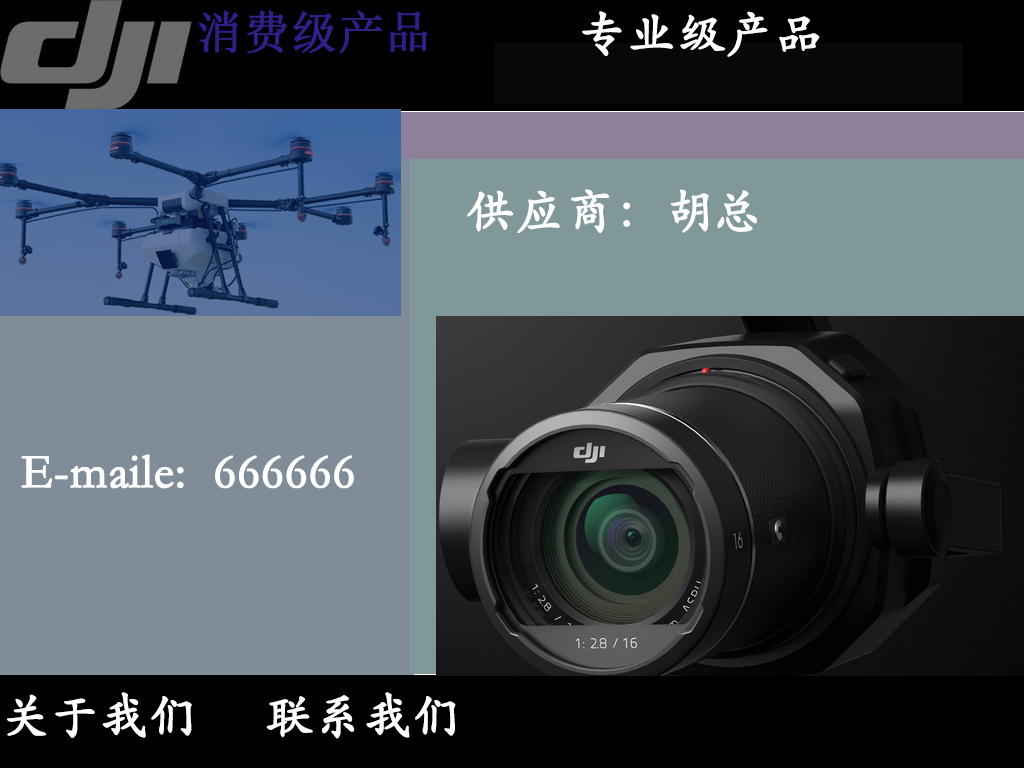
<style>
.page{position:relative;width:1024px;height:768px}
.page>*{position:absolute;margin:0}
.t1{font:48px "STKaiti";color:#ffffff;font-weight:bold}
</style>
<div class="page">
<p class="t1" style="left:582px;top:11px;width:238px;height:46px">专业级产品</p>
<p class="t1" style="left:467px;top:189px;width:290px;height:45px">供应商：胡总</p>
<p class="t1" style="left:21px;top:454px;width:333px;height:35px">E-maile:  666666</p>
<p class="t1" style="left:7px;top:692px;width:449px;height:47px">关于我们     联系我们</p>
</div>
